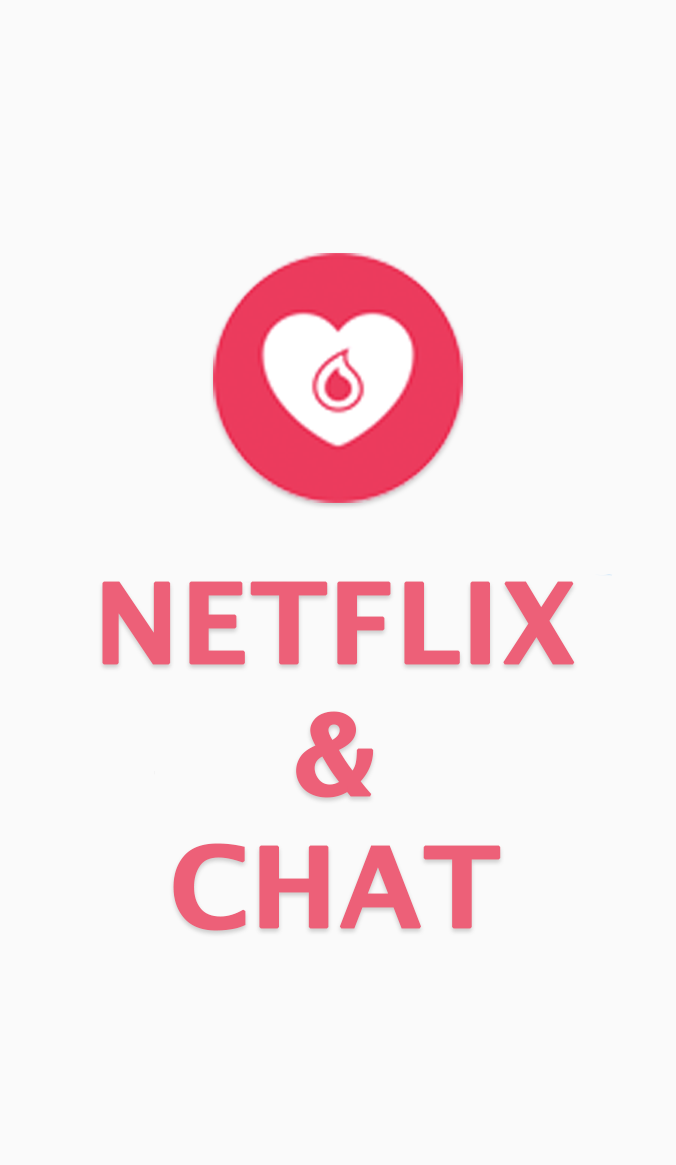
<style>
.page{position:relative;width:676px;height:1165px;background:#fafafa}
.page>*{position:absolute;margin:0}
.t1{font:110px "LucidaSans-Demi";color:#ed6078;font-weight:bold}
</style>
<div class="page">
<p class="t1" style="left:102px;top:581px;width:473px;height:350px;text-align:center">NETFLIX<br>&amp;<br>CHAT</p>
</div>
